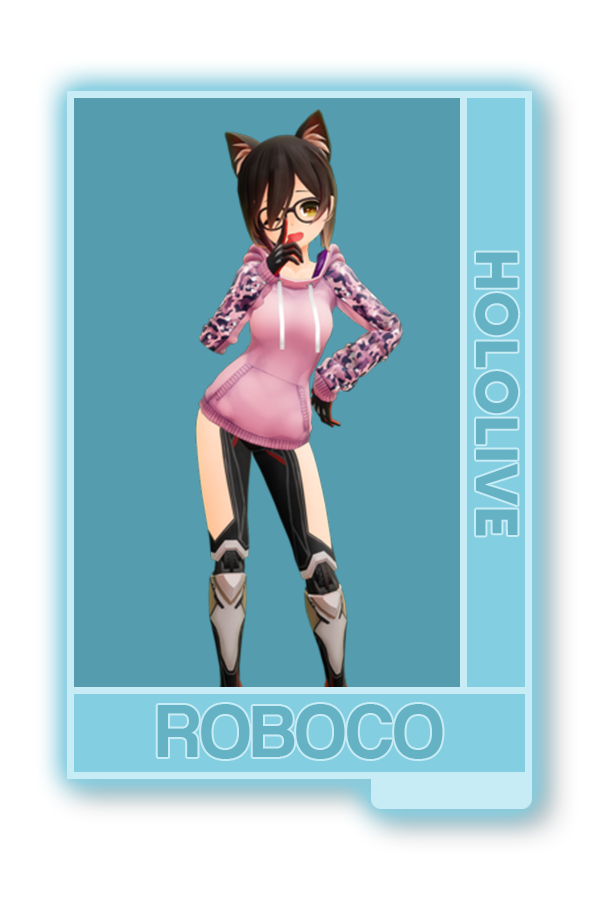
<style>
.page{position:relative;width:600px;height:900px;background:#549cae}
.page>*{position:absolute;margin:0}
.t1{font:59.2px "MADETOMMY-Bold";color:#66b2c5}
.t2{font:76.3px "CoolveticaRg-Regular";color:#66b2c5}
</style>
<div class="page">
<p class="t1" style="left:475px;top:252px;width:44px;height:284px;rotate:90deg">HOLOLIVE</p>
<p class="t2" style="left:157px;top:704px;width:286px;height:55px">ROBOCO</p>
</div>
